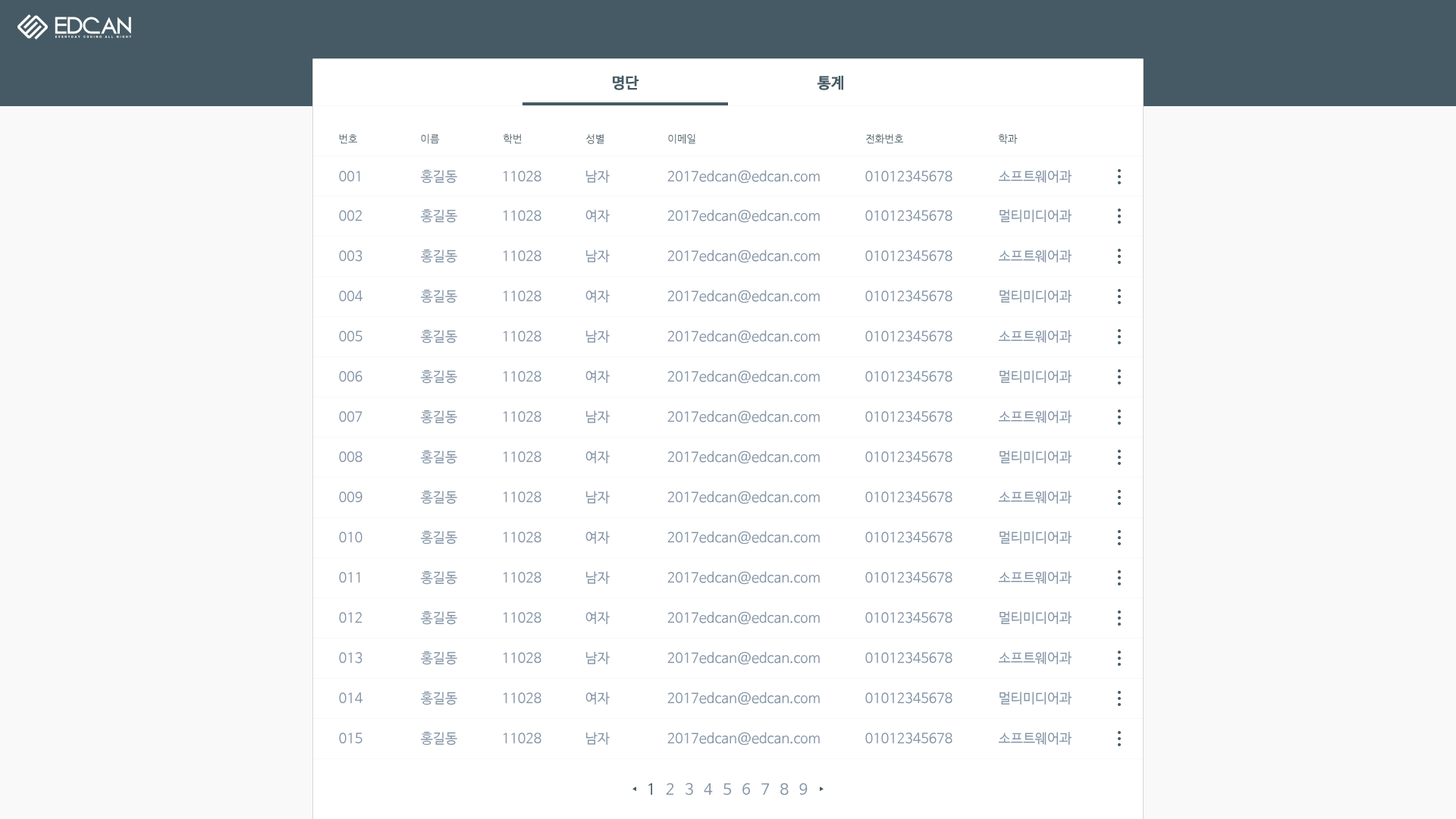
<style>
.page{position:relative;width:1456px;height:819px;background:#ffffff}
.page>*{position:absolute;margin:0}
.t1{font:15.2px "NanumBarunGothicBold";color:#455a64}
.t2{font:10.6px "NanumBarunGothic";color:#455a64}
.t3{font:13.6px "NanumBarunGothic";color:#8494a7}
.t4{font:15px "NanumBarunGothic";color:#8494a7}
.t5{font:15px "NanumBarunGothic";color:#455a64}
</style>
<div class="page">
<p class="t1" style="left:613px;top:75px;width:26px;height:15px">명단</p>
<p class="t1" style="left:817px;top:75px;width:26px;height:15px">통계</p>
<p class="t2" style="left:339px;top:133px;width:18px;height:11px">번호</p>
<p class="t2" style="left:421px;top:133px;width:19px;height:11px">이름</p>
<p class="t2" style="left:503px;top:133px;width:19px;height:11px">학번</p>
<p class="t2" style="left:585px;top:133px;width:19px;height:11px">성별</p>
<p class="t2" style="left:668px;top:133px;width:27px;height:11px">이메일</p>
<p class="t2" style="left:866px;top:133px;width:37px;height:11px">전화번호</p>
<p class="t2" style="left:998px;top:133px;width:20px;height:11px">학과</p>
<p class="t3" style="left:339px;top:171px;width:21px;height:11px">001</p>
<p class="t3" style="left:421px;top:170px;width:36px;height:14px">홍길동</p>
<p class="t3" style="left:504px;top:171px;width:37px;height:11px">11028</p>
<p class="t3" style="left:586px;top:170px;width:24px;height:13px">남자</p>
<p class="t3" style="left:667px;top:170px;width:153px;height:14px">2017edcan@edcan.com</p>
<p class="t3" style="left:865px;top:171px;width:87px;height:11px">01012345678</p>
<p class="t3" style="left:999px;top:170px;width:73px;height:13px">소프트웨어과</p>
<p class="t3" style="left:421px;top:209px;width:36px;height:14px">홍길동</p>
<p class="t3" style="left:585px;top:209px;width:25px;height:13px">여자</p>
<p class="t3" style="left:667px;top:209px;width:153px;height:14px">2017edcan@edcan.com</p>
<p class="t3" style="left:999px;top:209px;width:73px;height:13px">멀티미디어과</p>
<p class="t3" style="left:339px;top:210px;width:23px;height:11px">002</p>
<p class="t3" style="left:504px;top:210px;width:37px;height:11px">11028</p>
<p class="t3" style="left:865px;top:210px;width:87px;height:11px">01012345678</p>
<p class="t3" style="left:339px;top:250px;width:23px;height:12px">003</p>
<p class="t3" style="left:421px;top:249px;width:36px;height:14px">홍길동</p>
<p class="t3" style="left:504px;top:250px;width:37px;height:12px">11028</p>
<p class="t3" style="left:586px;top:249px;width:24px;height:13px">남자</p>
<p class="t3" style="left:667px;top:249px;width:153px;height:14px">2017edcan@edcan.com</p>
<p class="t3" style="left:865px;top:250px;width:87px;height:12px">01012345678</p>
<p class="t3" style="left:999px;top:249px;width:73px;height:13px">소프트웨어과</p>
<p class="t3" style="left:339px;top:290px;width:23px;height:12px">004</p>
<p class="t3" style="left:421px;top:290px;width:36px;height:13px">홍길동</p>
<p class="t3" style="left:504px;top:290px;width:37px;height:12px">11028</p>
<p class="t3" style="left:585px;top:290px;width:25px;height:13px">여자</p>
<p class="t3" style="left:667px;top:290px;width:153px;height:13px">2017edcan@edcan.com</p>
<p class="t3" style="left:865px;top:290px;width:87px;height:12px">01012345678</p>
<p class="t3" style="left:999px;top:290px;width:73px;height:13px">멀티미디어과</p>
<p class="t3" style="left:421px;top:330px;width:36px;height:14px">홍길동</p>
<p class="t3" style="left:586px;top:330px;width:24px;height:13px">남자</p>
<p class="t3" style="left:667px;top:330px;width:153px;height:14px">2017edcan@edcan.com</p>
<p class="t3" style="left:999px;top:330px;width:73px;height:13px">소프트웨어과</p>
<p class="t3" style="left:339px;top:331px;width:23px;height:11px">005</p>
<p class="t3" style="left:504px;top:331px;width:37px;height:11px">11028</p>
<p class="t3" style="left:865px;top:331px;width:87px;height:11px">01012345678</p>
<p class="t3" style="left:339px;top:371px;width:23px;height:11px">006</p>
<p class="t3" style="left:421px;top:370px;width:36px;height:14px">홍길동</p>
<p class="t3" style="left:504px;top:371px;width:37px;height:11px">11028</p>
<p class="t3" style="left:585px;top:370px;width:25px;height:13px">여자</p>
<p class="t3" style="left:667px;top:370px;width:153px;height:14px">2017edcan@edcan.com</p>
<p class="t3" style="left:865px;top:371px;width:87px;height:11px">01012345678</p>
<p class="t3" style="left:999px;top:370px;width:73px;height:13px">멀티미디어과</p>
<p class="t3" style="left:339px;top:411px;width:23px;height:11px">007</p>
<p class="t3" style="left:421px;top:410px;width:36px;height:14px">홍길동</p>
<p class="t3" style="left:504px;top:411px;width:37px;height:11px">11028</p>
<p class="t3" style="left:586px;top:410px;width:24px;height:13px">남자</p>
<p class="t3" style="left:667px;top:410px;width:153px;height:14px">2017edcan@edcan.com</p>
<p class="t3" style="left:865px;top:411px;width:87px;height:11px">01012345678</p>
<p class="t3" style="left:999px;top:410px;width:73px;height:13px">소프트웨어과</p>
<p class="t3" style="left:339px;top:451px;width:23px;height:12px">008</p>
<p class="t3" style="left:421px;top:450px;width:36px;height:14px">홍길동</p>
<p class="t3" style="left:504px;top:451px;width:37px;height:12px">11028</p>
<p class="t3" style="left:585px;top:450px;width:25px;height:13px">여자</p>
<p class="t3" style="left:667px;top:450px;width:153px;height:14px">2017edcan@edcan.com</p>
<p class="t3" style="left:865px;top:451px;width:87px;height:12px">01012345678</p>
<p class="t3" style="left:999px;top:450px;width:73px;height:13px">멀티미디어과</p>
<p class="t3" style="left:339px;top:491px;width:23px;height:12px">009</p>
<p class="t3" style="left:421px;top:491px;width:36px;height:13px">홍길동</p>
<p class="t3" style="left:504px;top:491px;width:37px;height:12px">11028</p>
<p class="t3" style="left:586px;top:491px;width:24px;height:13px">남자</p>
<p class="t3" style="left:667px;top:491px;width:153px;height:13px">2017edcan@edcan.com</p>
<p class="t3" style="left:865px;top:491px;width:87px;height:12px">01012345678</p>
<p class="t3" style="left:999px;top:491px;width:73px;height:13px">소프트웨어과</p>
<p class="t3" style="left:339px;top:532px;width:23px;height:11px">010</p>
<p class="t3" style="left:421px;top:531px;width:36px;height:13px">홍길동</p>
<p class="t3" style="left:504px;top:532px;width:37px;height:11px">11028</p>
<p class="t3" style="left:585px;top:531px;width:25px;height:13px">여자</p>
<p class="t3" style="left:667px;top:531px;width:153px;height:13px">2017edcan@edcan.com</p>
<p class="t3" style="left:865px;top:532px;width:87px;height:11px">01012345678</p>
<p class="t3" style="left:999px;top:531px;width:73px;height:13px">멀티미디어과</p>
<p class="t3" style="left:339px;top:572px;width:21px;height:11px">011</p>
<p class="t3" style="left:421px;top:571px;width:36px;height:14px">홍길동</p>
<p class="t3" style="left:504px;top:572px;width:37px;height:11px">11028</p>
<p class="t3" style="left:586px;top:571px;width:24px;height:13px">남자</p>
<p class="t3" style="left:667px;top:571px;width:153px;height:14px">2017edcan@edcan.com</p>
<p class="t3" style="left:865px;top:572px;width:87px;height:11px">01012345678</p>
<p class="t3" style="left:999px;top:571px;width:73px;height:13px">소프트웨어과</p>
<p class="t3" style="left:339px;top:612px;width:23px;height:11px">012</p>
<p class="t3" style="left:421px;top:611px;width:36px;height:14px">홍길동</p>
<p class="t3" style="left:504px;top:612px;width:37px;height:11px">11028</p>
<p class="t3" style="left:585px;top:611px;width:25px;height:13px">여자</p>
<p class="t3" style="left:667px;top:611px;width:153px;height:14px">2017edcan@edcan.com</p>
<p class="t3" style="left:865px;top:612px;width:87px;height:11px">01012345678</p>
<p class="t3" style="left:999px;top:611px;width:73px;height:13px">멀티미디어과</p>
<p class="t3" style="left:339px;top:652px;width:23px;height:12px">013</p>
<p class="t3" style="left:421px;top:651px;width:36px;height:14px">홍길동</p>
<p class="t3" style="left:504px;top:652px;width:37px;height:12px">11028</p>
<p class="t3" style="left:586px;top:651px;width:24px;height:13px">남자</p>
<p class="t3" style="left:667px;top:651px;width:153px;height:14px">2017edcan@edcan.com</p>
<p class="t3" style="left:865px;top:652px;width:87px;height:12px">01012345678</p>
<p class="t3" style="left:999px;top:651px;width:73px;height:13px">소프트웨어과</p>
<p class="t3" style="left:339px;top:692px;width:23px;height:12px">014</p>
<p class="t3" style="left:421px;top:692px;width:36px;height:13px">홍길동</p>
<p class="t3" style="left:504px;top:692px;width:37px;height:12px">11028</p>
<p class="t3" style="left:585px;top:692px;width:25px;height:12px">여자</p>
<p class="t3" style="left:667px;top:692px;width:153px;height:13px">2017edcan@edcan.com</p>
<p class="t3" style="left:865px;top:692px;width:87px;height:12px">01012345678</p>
<p class="t3" style="left:999px;top:692px;width:73px;height:12px">멀티미디어과</p>
<p class="t3" style="left:339px;top:733px;width:23px;height:11px">015</p>
<p class="t3" style="left:421px;top:732px;width:36px;height:13px">홍길동</p>
<p class="t3" style="left:504px;top:733px;width:37px;height:11px">11028</p>
<p class="t3" style="left:586px;top:732px;width:24px;height:13px">남자</p>
<p class="t3" style="left:667px;top:732px;width:153px;height:13px">2017edcan@edcan.com</p>
<p class="t3" style="left:865px;top:733px;width:87px;height:11px">01012345678</p>
<p class="t3" style="left:999px;top:732px;width:73px;height:13px">소프트웨어과</p>
<p class="t4" style="left:648px;top:783px;width:160px;height:12px"><span class="t5">1</span>   2   3   4   5   6   7   8   9</p>
</div>
